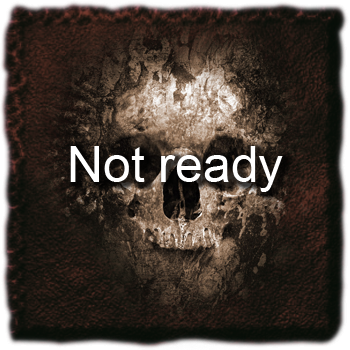
<style>
.page{position:relative;width:350px;height:350px}
.page>*{position:absolute;margin:0}
.t1{font:50px "ArialMT";color:#ffffff}
</style>
<div class="page">
<p class="t1" style="left:70px;top:146px;width:213px;height:46px">Not ready</p>
</div>
